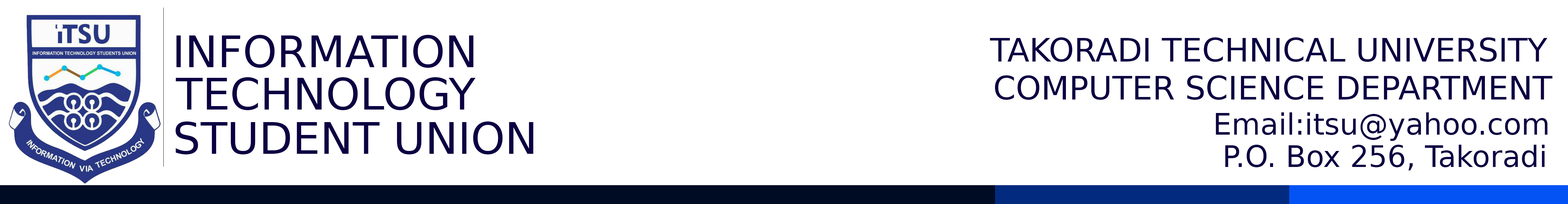
<style>
.page{position:relative;width:1568px;height:204px;background:#ffffff}
.page>*{position:absolute;margin:0}
.t1{font:43.6px "BitstreamVeraSans-Roman";color:#0b0042}
.t2{font:32.3px "BitstreamVeraSans-Roman";color:#0b0042}
.t3{font:29.5px "BitstreamVeraSans-Roman";color:#0b0042}
</style>
<div class="page">
<p class="t1" style="left:176px;top:35px;width:298px;height:33px">INFORMATION</p>
<p class="t2" style="left:990px;top:37px;width:558px;height:25px">TAKORADI TECHNICAL UNIVERSITY</p>
<p class="t1" style="left:176px;top:77px;width:300px;height:33px">TECHNOLOGY</p>
<p class="t2" style="left:995px;top:75px;width:558px;height:25px">COMPUTER SCIENCE DEPARTMENT</p>
<p class="t3" style="left:1216px;top:112px;width:332px;height:29px">Email:itsu@yahoo.com</p>
<p class="t1" style="left:175px;top:121px;width:358px;height:33px">STUDENT UNION</p>
<p class="t3" style="left:1225px;top:145px;width:320px;height:25px">P.O. Box 256, Takoradi</p>
</div>
